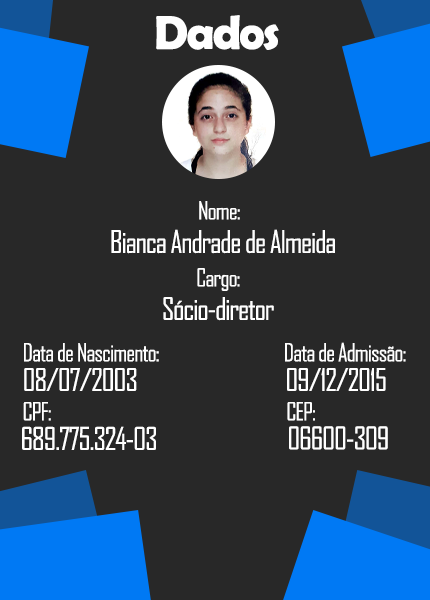
<style>
.page{position:relative;width:430px;height:600px;background:#282828}
.page>*{position:absolute;margin:0}
.t1{font:48px "BerlinSansFBDemi-Bold";letter-spacing:-0.04em;color:#ffffff}
.t2{font:24px "AgencyFB-Reg";letter-spacing:-0.04em;color:#ffffff}
.t3{font:30px "AgencyFB-Reg";letter-spacing:-0.04em;color:#ffffff}
</style>
<div class="page">
<p class="t1" style="left:156px;top:15px;width:123px;height:35px">Dados</p>
<p class="t2" style="left:199px;top:201px;width:41px;height:19px">Nome:</p>
<p class="t3" style="left:111px;top:229px;width:224px;height:25px">Bianca Andrade de Almeida</p>
<p class="t2" style="left:197px;top:268px;width:43px;height:23px">Cargo:</p>
<p class="t3" style="left:163px;top:297px;width:111px;height:24px">Sócio-diretor</p>
<p class="t2" style="left:285px;top:342px;width:121px;height:20px">Data de Admissão:</p>
<p class="t2" style="left:24px;top:343px;width:135px;height:19px">Data de Nascimento:</p>
<p class="t3" style="left:24px;top:368px;width:113px;height:23px">08/07/2003</p>
<p class="t3" style="left:287px;top:368px;width:99px;height:23px">09/12/2015</p>
<p class="t2" style="left:23px;top:402px;width:28px;height:19px">CPF:</p>
<p class="t2" style="left:287px;top:402px;width:28px;height:19px">CEP:</p>
<p class="t3" style="left:22px;top:426px;width:134px;height:24px">689.775.324-03</p>
<p class="t3" style="left:289px;top:426px;width:99px;height:24px">06600-309</p>
</div>
